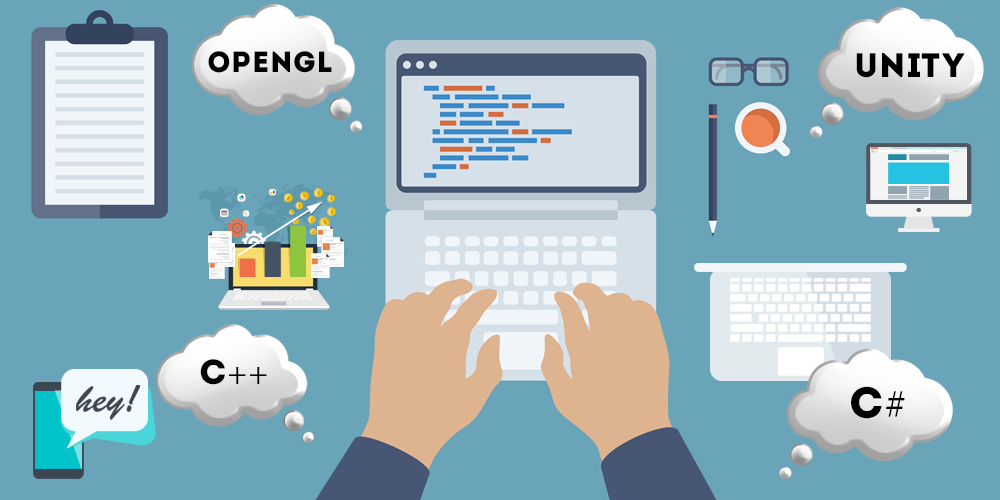
<style>
.page{position:relative;width:1000px;height:500px;background:#6aa4b8}
.page>*{position:absolute;margin:0}
.t1{font:29.2px "Intro";letter-spacing:0.02em;color:#000000;text-transform:uppercase}
.t2{font:34.1px "Intro";letter-spacing:0.02em;color:#000000;text-transform:uppercase}
.t3{font:35px "MinionPro-Regular";letter-spacing:0.02em;color:#000000;text-transform:uppercase}
.t4{font:35px "Intro";letter-spacing:0.02em;color:#000000;text-transform:uppercase}
.t5{font:44.1px "Intro";letter-spacing:0.02em;color:#000000;text-transform:uppercase}
.t6{font:44.1px "MinionPro-Regular";letter-spacing:0.02em;color:#000000;text-transform:uppercase}
</style>
<div class="page">
<p class="t1" style="left:208px;top:51px;width:124px;height:22px">OPENGL</p>
<p class="t2" style="left:856px;top:53px;width:109px;height:25px">UNITY</p>
<p class="t3" style="left:200px;top:359px;width:67px;height:26px"><span class="t4">C</span>++</p>
<p class="t5" style="left:851px;top:386px;width:54px;height:33px">C<span class="t6">#</span></p>
</div>
